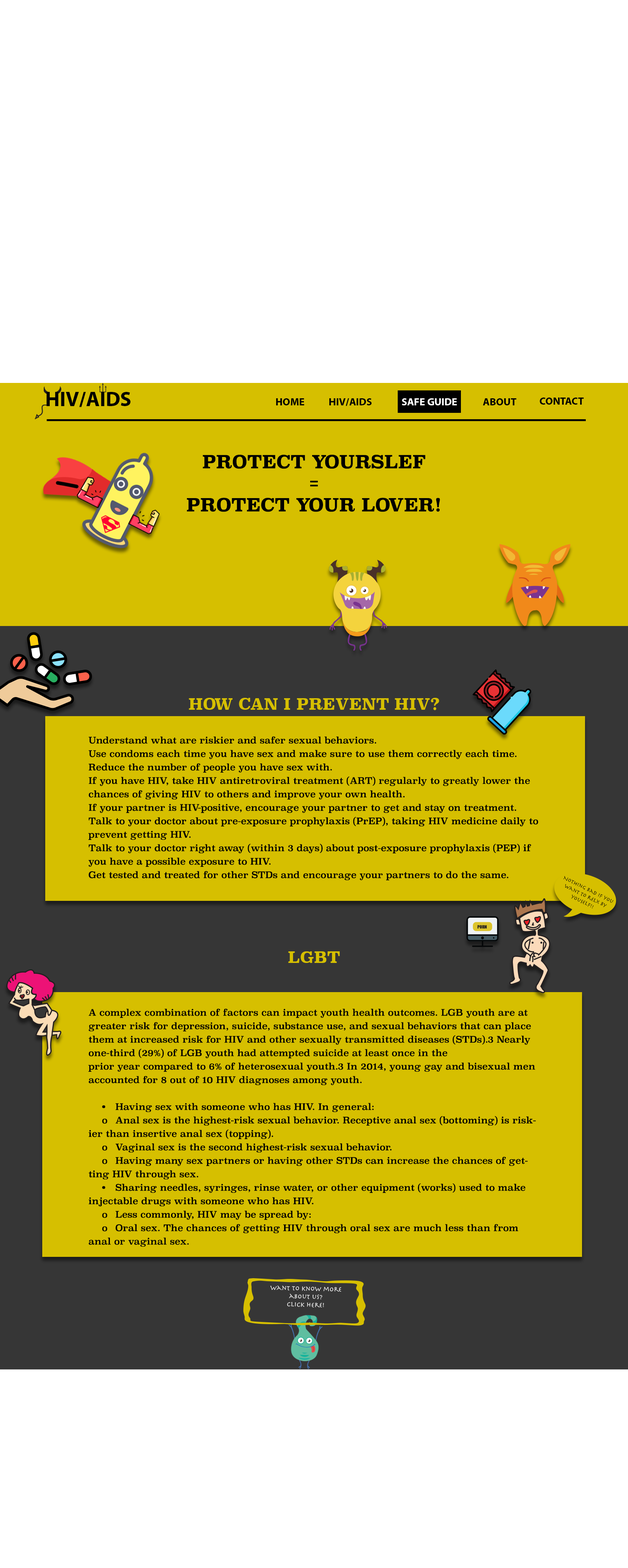
<style>
.page{position:relative;width:628px;height:1568px;background:#ffffff}
.page>*{position:absolute;margin:0}
.t1{font:20.9px "MyriadPro-Bold";color:#000000}
.t2{font:10.5px "MyriadPro-Bold";color:#000000}
.t3{font:10.5px "MyriadPro-Bold";color:#ffffff}
.t4{font:17.9px "Superclarendon-Bold";color:#000000}
.t5{font:15.7px "Superclarendon-Bold";color:#d6bf00}
.t6{font:9px/13.5px "Superclarendon-Regular";color:#000000}
.t7{font:5.6px "Herculanum";color:#000000}
.t8{font:6.7px "Herculanum";color:#ffffff}
</style>
<div class="page">
<p class="t1" style="left:46px;top:392px;width:85px;height:15px">HIV/AIDS</p>
<p class="t2" style="left:276px;top:398px;width:28px;height:7px">HOME</p>
<p class="t2" style="left:329px;top:398px;width:43px;height:8px">HIV/AIDS</p>
<p class="t3" style="left:402px;top:398px;width:55px;height:7px">SAFE GUIDE</p>
<p class="t2" style="left:483px;top:398px;width:34px;height:7px">ABOUT</p>
<p class="t2" style="left:540px;top:398px;width:44px;height:7px">CONTACT</p>
<p class="t4" style="left:187px;top:455px;width:253px;height:57px;text-align:center">PROTECT YOURSLEF<br>=<br>PROTECT YOUR LOVER!</p>
<p class="t5" style="left:189px;top:698px;width:250px;height:12px">HOW CAN I PREVENT HIV?</p>
<p class="t6" style="left:88px;top:736px;width:450px;height:144px;text-align:right">Understand what are riskier and safer sexual behaviors.<br>Use condoms each time you have sex and make sure to use them correctly each time.<br>Reduce the number of people you have sex with.<br>If you have HIV, take HIV antiretroviral treatment (ART) regularly to greatly lower the chances of giving HIV to others and improve your own health.<br>If your partner is HIV-positive, encourage your partner to get and stay on treatment.<br>Talk to your doctor about pre-exposure prophylaxis (PrEP), taking HIV medicine daily to prevent getting HIV. <br>Talk to your doctor right away (within 3 days) about post-exposure prophylaxis (PEP) if you have a possible exposure to HIV.<br>Get tested and treated for other STDs and encourage your partners to do the same.</p>
<p class="t7" style="left:564px;top:876px;width:50px;height:33px;rotate:26deg">NOthing bad if you want to relx by youself!!</p>
<p class="t5" style="left:288px;top:951px;width:52px;height:12px">LGBT</p>
<p class="t6" style="left:88px;top:1009px;width:448px;height:238px;text-align:right">A complex combination of factors can impact youth health outcomes. LGB youth are at greater risk for depression, suicide, substance use, and sexual behaviors that can place them at increased risk for HIV and other sexually transmitted diseases (STDs).3 Nearly one-third (29%) of LGB youth had attempted suicide at least once in the <br>prior year compared to 6% of heterosexual youth.3 In 2014, young gay and bisexual men accounted for 8 out of 10 HIV diagnoses among youth.<br><br> • Having sex with someone who has HIV. In general:<br> o Anal sex is the highest-risk sexual behavior. Receptive anal sex (bottoming) is riskier than insertive anal sex (topping).<br> o Vaginal sex is the second highest-risk sexual behavior.<br> o Having many sex partners or having other STDs can increase the chances of getting HIV through sex.<br> • Sharing needles, syringes, rinse water, or other equipment (works) used to make injectable drugs with someone who has HIV.<br> o Less commonly, HIV may be spread by:<br> o Oral sex. The chances of getting HIV through oral sex are much less than from anal or vaginal sex.</p>
<p class="t8" style="left:270px;top:1285px;width:71px;height:22px;text-align:center;rotate:2deg">Want to know more about us?<br>Click here!</p>
</div>
